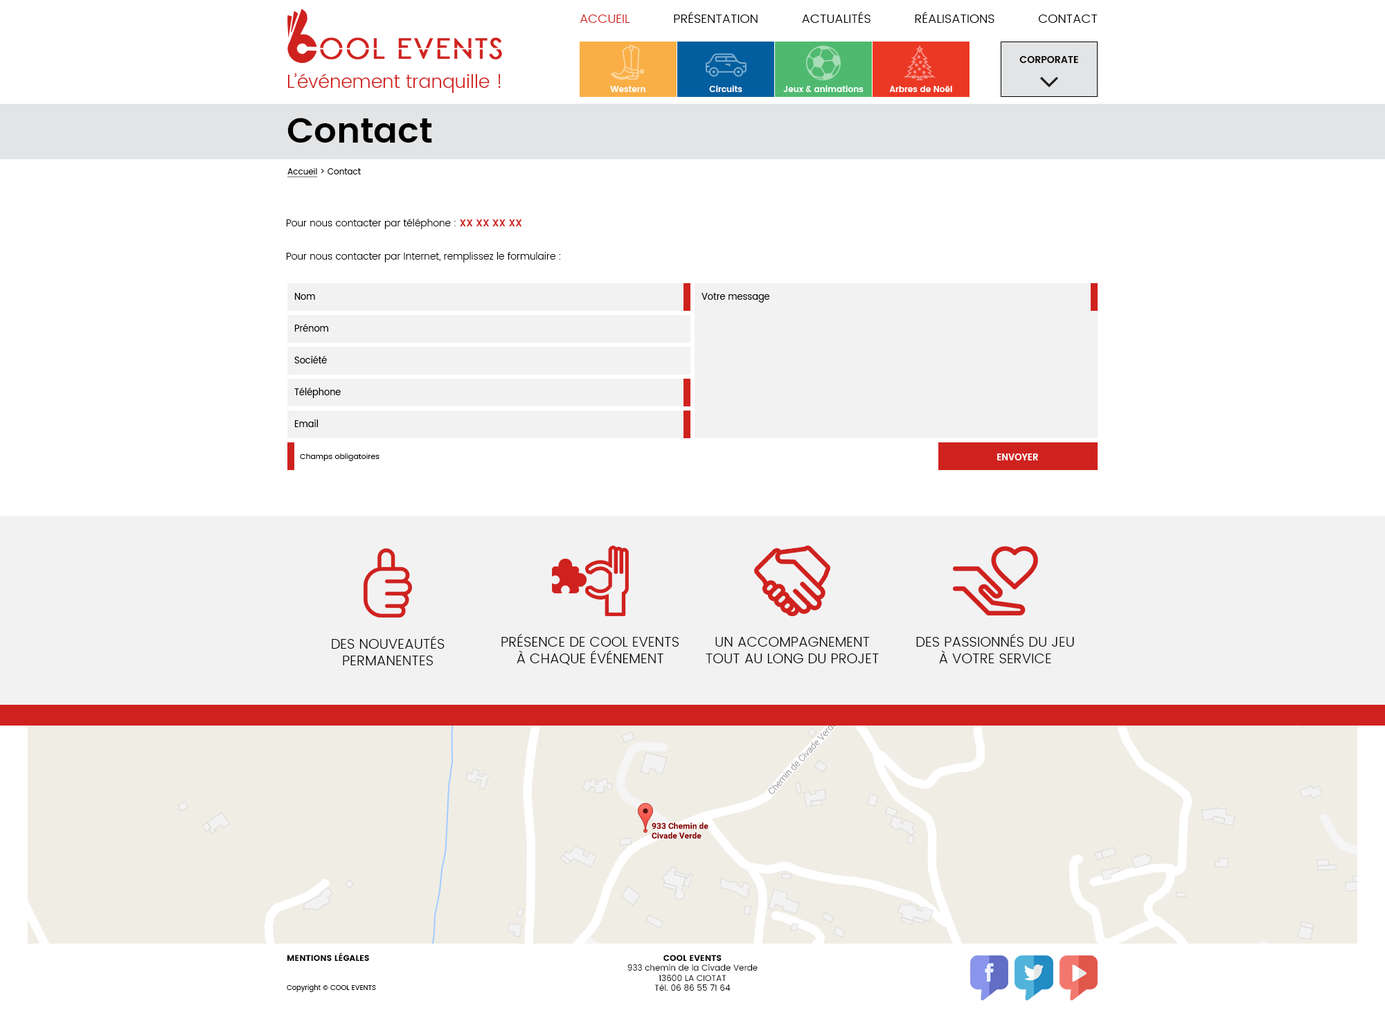
<style>
.page{position:relative;width:1385px;height:1017px;background:#ffffff}
.page>*{position:absolute;margin:0}
.t1{font:12.5px "Poppins-Light";color:#000000;text-transform:uppercase}
.t2{font:12.5px "Poppins-Light";color:#cf221f;text-transform:uppercase}
.t3{font:9.7px "Poppins-SemiBold";color:#000000}
.t4{font:18.7px "Poppins-Light";color:#cf211e}
.t5{font:8.3px "Poppins-SemiBold";color:#ffffff}
.t6{font:34.6px "Poppins-SemiBold";color:#000000}
.t7{font:8.3px "Poppins-Regular";color:#000000}
.t8{font:8.3px "Poppins-Regular";color:#000000;text-decoration:underline}
.t9{font:9.7px/16.6px "Poppins-Light";color:#000000}
.t10{font:9.7px/16.6px "Poppins-SemiBold";color:#cf221f}
.t11{font:9px "Poppins-Regular";color:#000000}
.t12{font:7.6px "Poppins-Regular";color:#000000}
.t13{font:9px "Poppins-SemiBold";color:#ffffff}
.t14{font:13.8px "Poppins-Light";color:#000000;text-transform:uppercase}
.t15{font:8.3px "Poppins";color:#000000;text-transform:uppercase}
.t16{font:6.9px "Poppins-Regular";color:#000000}
</style>
<div class="page">
<p class="t1" style="left:579px;top:12px;width:518px;height:11px"><span class="t2">accueil </span>Présentation Actualités Réalisations Contact</p>
<p class="t3" style="left:1019px;top:56px;width:59px;height:7px">CORPORATE</p>
<p class="t4" style="left:287px;top:73px;width:214px;height:20px">L’événement tranquille !</p>
<p class="t5" style="left:610px;top:86px;width:35px;height:6px">Western</p>
<p class="t5" style="left:709px;top:85px;width:33px;height:7px">Circuits</p>
<p class="t5" style="left:783px;top:85px;width:80px;height:7px">Jeux &amp; animations</p>
<p class="t5" style="left:889px;top:86px;width:63px;height:6px">Arbres de Noël</p>
<p class="t6" style="left:287px;top:118px;width:145px;height:25px">Contact</p>
<p class="t7" style="left:287px;top:168px;width:74px;height:9px"><span class="t8">Accueil</span> &gt; Contact</p>
<p class="t9" style="left:286px;top:219px;width:275px;height:43px;text-align:justify">Pour nous contacter par téléphone : <span class="t10">XX XX XX XX<br></span><br>Pour nous contacter par Internet, remplissez le formulaire :</p>
<p class="t11" style="left:294px;top:293px;width:21px;height:7px">Nom</p>
<p class="t11" style="left:701px;top:293px;width:69px;height:10px">Votre message</p>
<p class="t11" style="left:294px;top:324px;width:34px;height:8px">Prénom</p>
<p class="t11" style="left:294px;top:356px;width:33px;height:7px">Société</p>
<p class="t11" style="left:294px;top:388px;width:47px;height:10px">Téléphone</p>
<p class="t11" style="left:294px;top:420px;width:24px;height:7px">Email</p>
<p class="t12" style="left:300px;top:453px;width:79px;height:8px">Champs obligatoires</p>
<p class="t13" style="left:997px;top:453px;width:41px;height:7px">ENVOYER</p>
<p class="t14" style="left:332px;top:636px;width:112px;height:29px;text-align:center">des nouveautés permanentes</p>
<p class="t14" style="left:501px;top:633px;width:177px;height:32px;text-align:center">Présence de Cool Events <br>à chaque événement</p>
<p class="t14" style="left:705px;top:637px;width:174px;height:26px;text-align:center">Un accompagnement <br>tout au long du projet</p>
<p class="t14" style="left:916px;top:633px;width:158px;height:30px;text-align:center">Des passionnés du jeu <br>à votre service</p>
<p class="t15" style="left:287px;top:953px;width:82px;height:8px">Mentions légales</p>
<p class="t7" style="left:627px;top:955px;width:130px;height:36px;text-align:center"><span class="t15">Cool Events<br></span>933 chemin de la Civade Verde<br>13600 LA CIOTAT<br>Tél. 06 86 55 71 64</p>
<p class="t16" style="left:287px;top:984px;width:89px;height:8px">Copyright © COOL EVENTS</p>
</div>
